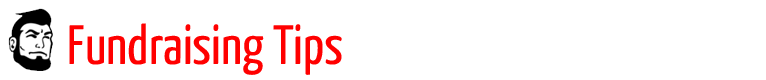
<style>
.page{position:relative;width:766px;height:80px;background:#ffffff}
.page>*{position:absolute;margin:0}
.t1{font:55.3px "YanoneKaffeesatz-Regular";color:#ff0000}
</style>
<div class="page">
<p class="t1" style="left:69px;top:23px;width:273px;height:52px">Fundraising Tips</p>
</div>
